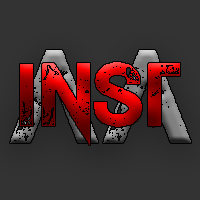
<style>
.page{position:relative;width:200px;height:200px;background:#333333}
.page>*{position:absolute;margin:0}
.t1{font:122.6px "TheLastCall"}
.t2{font:82.7px "TheLastCall"}
</style>
<div class="page">
<p class="t1" style="left:10px;top:50px;width:181px;height:93px">AA</p>
<p class="t2" style="left:20px;top:62px;width:160px;height:83px">Inst</p>
</div>
